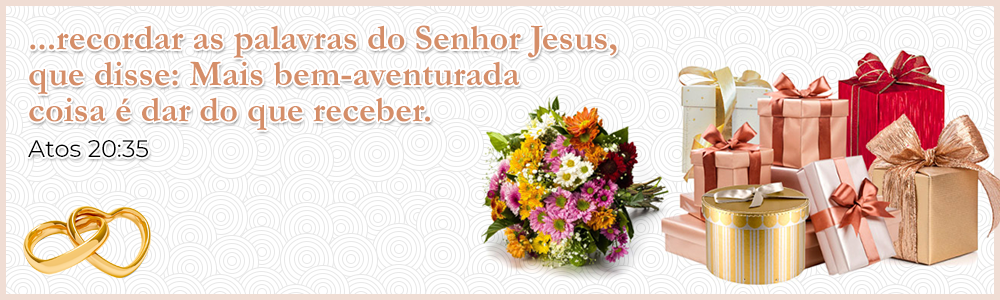
<style>
.page{position:relative;width:1000px;height:300px;background:#ffffff}
.page>*{position:absolute;margin:0}
.t1{font:36px/36px "Garamond-Bold";color:#d58e68}
.t2{font:24px/36px "Montserrat-Regular";color:#010101}
</style>
<div class="page">
<p class="t1" style="left:28px;top:25px;width:589px;height:133px">...recordar as palavras do Senhor Jesus, <br>que disse: Mais bem-aventurada <br>coisa é dar do que receber.<br><span class="t2">Atos 20:35</span></p>
</div>
